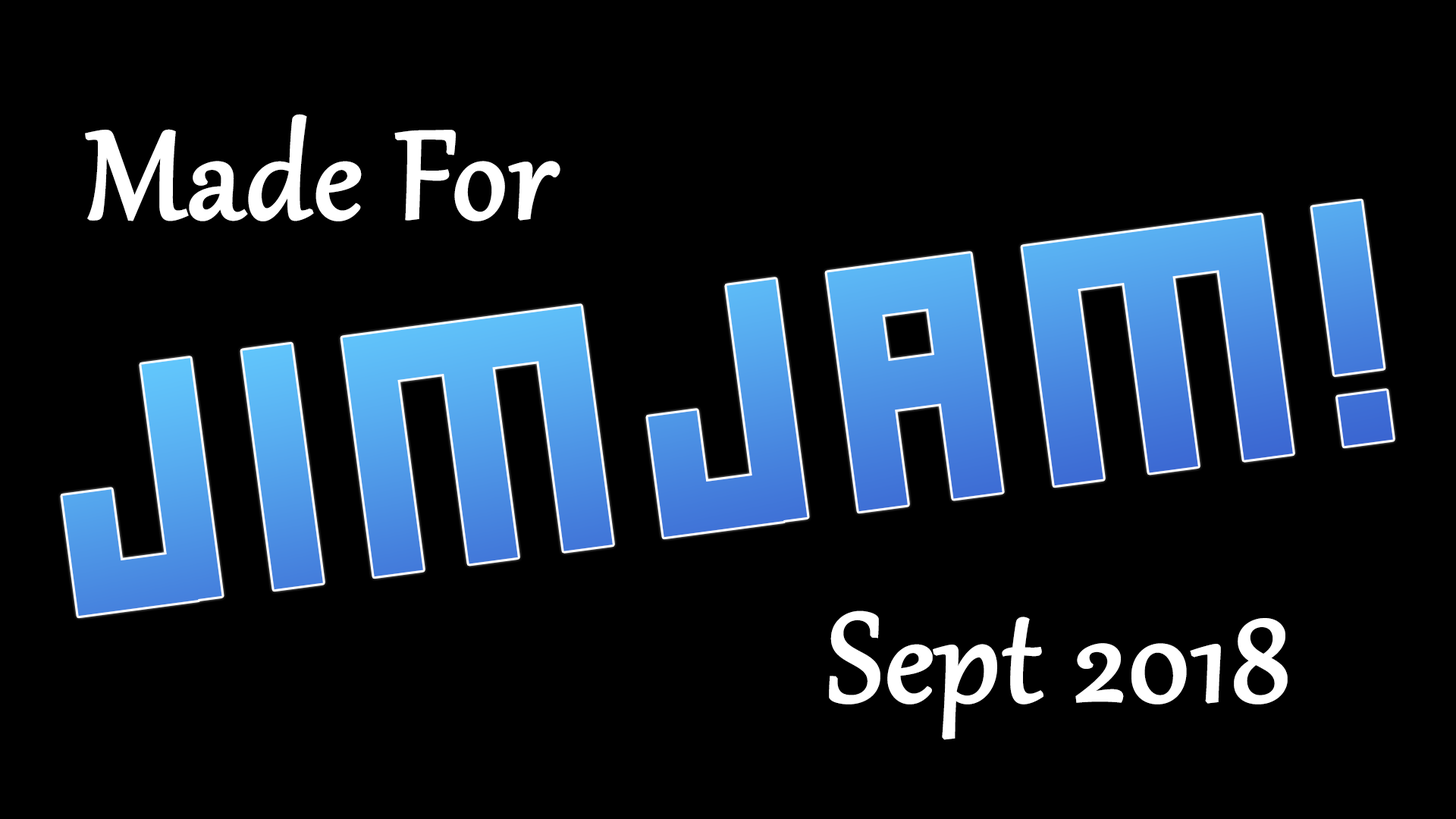
<style>
.page{position:relative;width:1456px;height:819px;background:#000000}
.page>*{position:absolute;margin:0}
.t1{font:151.7px "Gabriola";color:#ffffff;font-weight:bold}
</style>
<div class="page">
<p class="t1" style="left:85px;top:114px;width:475px;height:107px">Made For</p>
<p class="t1" style="left:829px;top:610px;width:459px;height:130px">Sept 2018</p>
</div>
